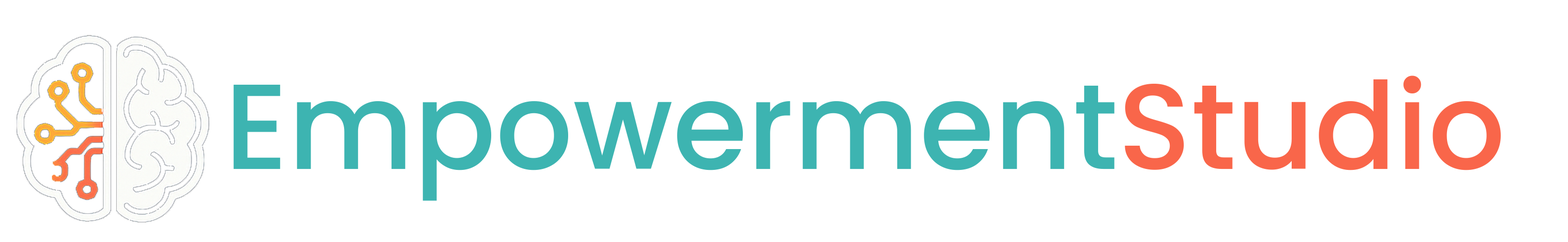
<style>
.page{position:relative;width:1568px;height:242px;background:#ffffff}
.page>*{position:absolute;margin:0}
.t1{font:121px "Poppins-Medium";color:#3db4b1}
.t2{font:121px "Poppins-Medium";color:#f9664a}
</style>
<div class="page">
<p class="t1" style="left:233px;top:75px;width:1268px;height:126px">Empowerment<span class="t2">Studio</span></p>
</div>
